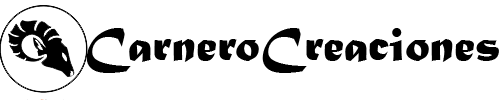
<style>
.page{position:relative;width:500px;height:100px;background:#ffffff}
.page>*{position:absolute;margin:0}
.t1{font:50px "MaturaMTScriptCapitals";color:#000000}
</style>
<div class="page">
<p class="t1" style="left:86px;top:28px;width:413px;height:45px">CarneroCreaciones</p>
</div>
